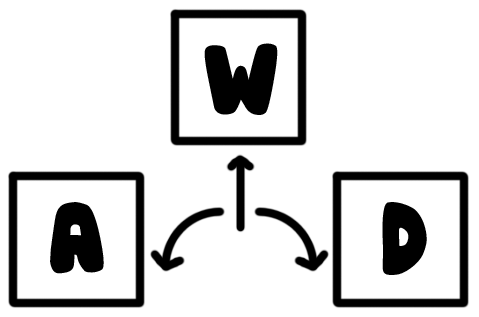
<style>
.page{position:relative;width:479px;height:317px;background:#ffffff}
.page>*{position:absolute;margin:0}
.t1{font:72px "DJBHUNKYCHUNK-Bold";color:#000000}
</style>
<div class="page">
<p class="t1" style="left:204px;top:43px;width:74px;height:72px">W</p>
<p class="t1" style="left:50px;top:202px;width:54px;height:72px">A</p>
<p class="t1" style="left:382px;top:202px;width:45px;height:73px">D</p>
</div>
